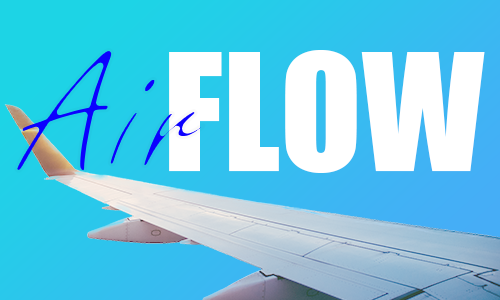
<style>
.page{position:relative;width:500px;height:300px}
.page>*{position:absolute;margin:0}
.t1{font:183.3px "FreestyleScript-Regular";letter-spacing:0.05em;color:#0c00ff}
.t2{font:150px "Impact";color:#ffffff}
</style>
<div class="page">
<p class="t1" style="left:14px;top:48px;width:192px;height:126px">Air</p>
<p class="t2" style="left:169px;top:50px;width:316px;height:123px">FLOW</p>
</div>
